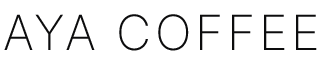
<style>
.page{position:relative;width:320px;height:64px;background:#ffffff}
.page>*{position:absolute;margin:0}
.t1{font:48.5px "Inter-ExtraLight";letter-spacing:0.075em;color:#0c0c0d}
</style>
<div class="page">
<p class="t1" style="left:4px;top:14px;width:313px;height:37px">AYA COFFEE</p>
</div>
